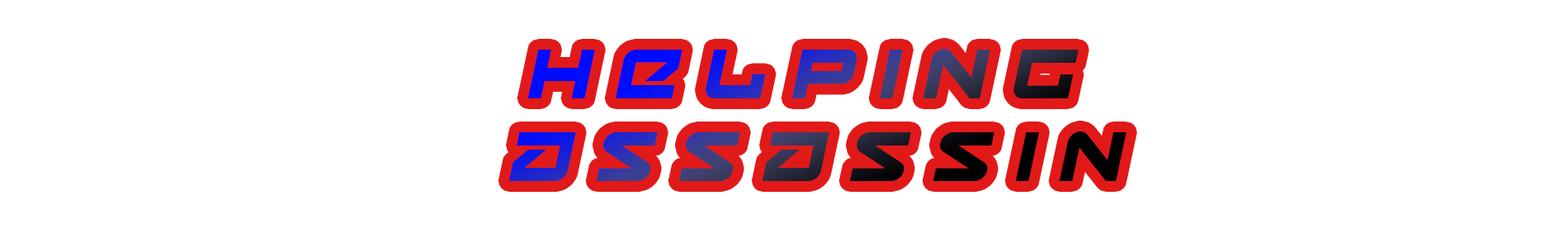
<style>
.page{position:relative;width:1568px;height:248px;background:#ffffff}
.page>*{position:absolute;margin:0}
.t1{font:68.8px "Onky-Italic"}
.t2{font:61.9px "Onky-Italic"}
</style>
<div class="page">
<p class="t1" style="left:508px;top:49px;width:618px;height:132px"><span class="t2">    <br>   </span> H e l p i n G <br>   A s s a s s i n</p>
</div>
